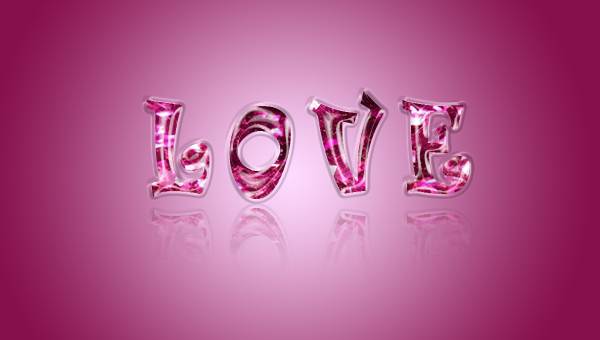
<style>
.page{position:relative;width:600px;height:340px}
.page>*{position:absolute;margin:0}
.t1{font:116px "Ravie";letter-spacing:0.22em;text-transform:uppercase;scale:0.68 1}
</style>
<div class="page">
<p class="t1" style="left:147px;top:91px;width:323px;height:108px">love</p>
<p class="t1" style="left:147px;top:91px;width:323px;height:108px">love</p>
<p class="t1" style="left:147px;top:91px;width:323px;height:108px">love</p>
</div>
